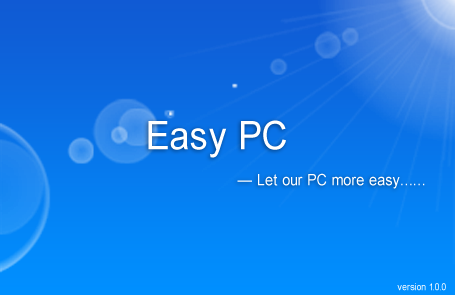
<style>
.page{position:relative;width:455px;height:295px}
.page>*{position:absolute;margin:0}
.t1{font:39.2px "ArialMT";letter-spacing:0.05em;color:#ffffff;scale:0.93 1}
.t2{font:15.7px "ArialMT";letter-spacing:0.05em;color:#ffffff;scale:0.93 1}
.t3{font:9.8px "ArialMT";letter-spacing:0.05em;color:#ffffff;scale:0.93 1}
</style>
<div class="page">
<p class="t1" style="left:148px;top:120px;width:138px;height:38px">Easy PC</p>
<p class="t2" style="left:237px;top:173px;width:188px;height:16px">— Let our PC more easy……</p>
<p class="t3" style="left:397px;top:283px;width:49px;height:8px">version 1.0.0</p>
</div>
